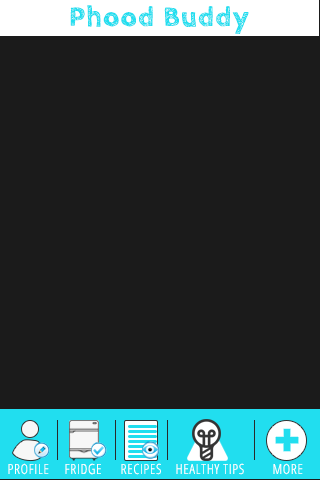
<style>
.page{position:relative;width:320px;height:480px;background:#1b1b1b}
.page>*{position:absolute;margin:0}
.t1{font:28px "CabinSketch-Bold";letter-spacing:0.05em;color:#21deef}
.t2{font:14px "OpenSans-CondensedLight";letter-spacing:0.05em;color:#ffffff;text-transform:uppercase}
</style>
<div class="page">
<p class="t1" style="left:70px;top:5px;width:179px;height:29px">Phood Buddy</p>
<p class="t2" style="left:8px;top:463px;width:41px;height:12px">Profile</p>
<p class="t2" style="left:65px;top:463px;width:36px;height:12px">fridge</p>
<p class="t2" style="left:121px;top:463px;width:40px;height:12px">recipes</p>
<p class="t2" style="left:176px;top:463px;width:68px;height:12px">healthy tips</p>
<p class="t2" style="left:273px;top:463px;width:30px;height:12px">more</p>
</div>
